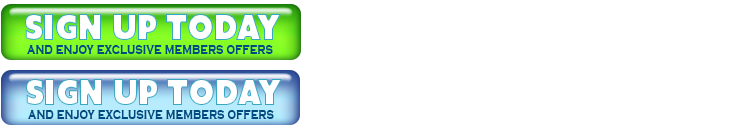
<style>
.page{position:relative;width:730px;height:130px;background:#ffffff}
.page>*{position:absolute;margin:0}
.t1{font:34.8px "AzoSansUber-Regular";color:#ffffff;scale:0.86 1}
.t2{font:15.2px "CopperplateGothic-Bold";color:#004a80;scale:0.79 1}
</style>
<div class="page">
<p class="t1" style="left:25px;top:14px;width:256px;height:26px">Sign up Today</p>
<p class="t2" style="left:27px;top:45px;width:246px;height:9px">and enjoy exclusive members offers</p>
<p class="t1" style="left:26px;top:79px;width:256px;height:26px">Sign up Today</p>
<p class="t2" style="left:28px;top:110px;width:246px;height:9px">and enjoy exclusive members offers</p>
</div>
